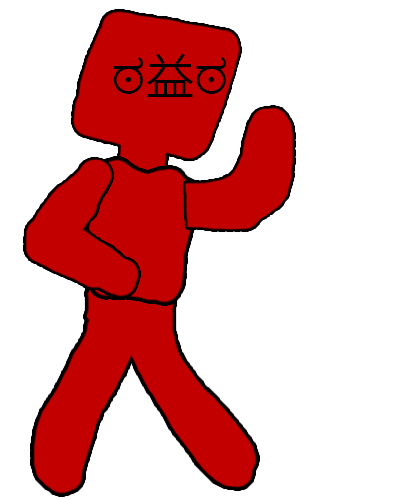
<style>
.page{position:relative;width:400px;height:500px;background:#ffffff}
.page>*{position:absolute;margin:0}
.t1{font:48px "NirmalaUI-Semilight";color:#000000}
.t2{font:48px "KozGoPr6N-Regular";color:#000000}
</style>
<div class="page">
<p class="t1" style="left:113px;top:53px;width:114px;height:44px">ಠ<span class="t2">益</span>ಠ</p>
</div>
